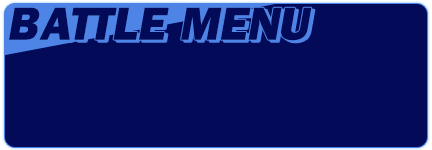
<style>
.page{position:relative;width:432px;height:150px;background:#030a58}
.page>*{position:absolute;margin:0}
.t1{font:48px "FranklinGothic-Heavy";letter-spacing:0.05em;color:#030a58;font-style:italic}
</style>
<div class="page">
<p class="t1" style="left:9px;top:7px;width:303px;height:34px">BATTLE MENU</p>
</div>
